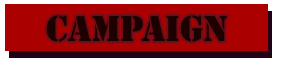
<style>
.page{position:relative;width:300px;height:60px;background:#ab0000}
.page>*{position:absolute;margin:0}
.t1{font:33.3px "StencilStd";color:#1d0000}
</style>
<div class="page">
<p class="t1" style="left:46px;top:15px;width:181px;height:27px">CaMPAIGN</p>
</div>
